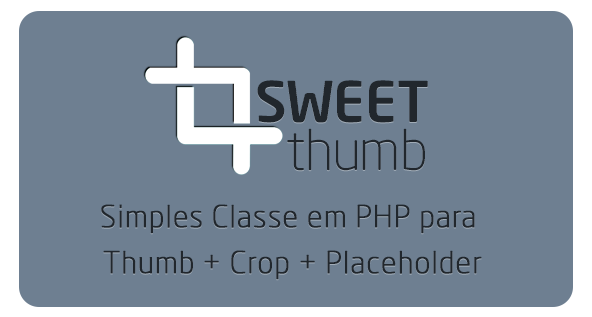
<style>
.page{position:relative;width:592px;height:317px;background:#6e7f91}
.page>*{position:absolute;margin:0}
.t1{font:55.6px "NeoSansPro-Medium";color:#21272d;text-transform:uppercase}
.t2{font:55.6px "NeoSansPro-Light";letter-spacing:-0.02em;color:#21272d}
.t3{font:30px/45.7px "NeoSansPro-Light";letter-spacing:0.02em;color:#21272d;font-weight:bold}
</style>
<div class="page">
<p class="t1" style="left:257px;top:80px;width:171px;height:43px">Sweet</p>
<p class="t2" style="left:287px;top:128px;width:138px;height:43px">thumb</p>
<p class="t3" style="left:101px;top:204px;width:381px;height:76px;text-align:center">Simples Classe em PHP para <br>Thumb + Crop + Placeholder</p>
</div>
